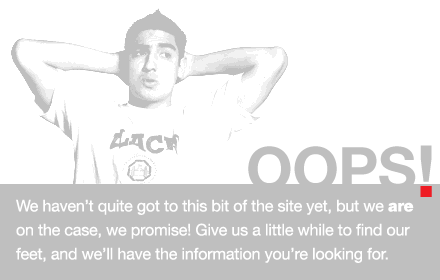
<style>
.page{position:relative;width:440px;height:280px;background:#ffffff}
.page>*{position:absolute;margin:0}
.t1{font:60px "HelveticaNeueLTStd-Bd";letter-spacing:-0.01em;color:#bfbfbf;text-transform:uppercase}
.t2{font:72px "HelveticaNeueLTStd-Bd";letter-spacing:-0.01em;color:#bfbfbf;text-transform:uppercase}
.t3{font:16px/24px "HelveticaNeueLTStd-Roman";letter-spacing:-0.01em;color:#ffffff}
.t4{font:16px/24px "HelveticaNeueLTStd-Hv";letter-spacing:-0.01em;color:#ffffff}
</style>
<div class="page">
<p class="t1" style="left:248px;top:145px;width:184px;height:52px">Oops<span class="t2">!</span></p>
<p class="t3" style="left:16px;top:199px;width:398px;height:64px">We haven’t quite got to this bit of the site yet, but we <span class="t4">are </span>on the case, we promise! Give us a little while to find our feet, and we’ll have the information you’re looking for.</p>
</div>
